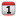
<style>
.page{position:relative;width:17px;height:17px;background:#ffffff}
.page>*{position:absolute;margin:0}
.t1{font:9.6px "BookAntiqua";color:#000000;font-weight:bold}
</style>
<div class="page">
<p class="t1" style="left:6px;top:6px;width:5px;height:8px">1</p>
</div>
